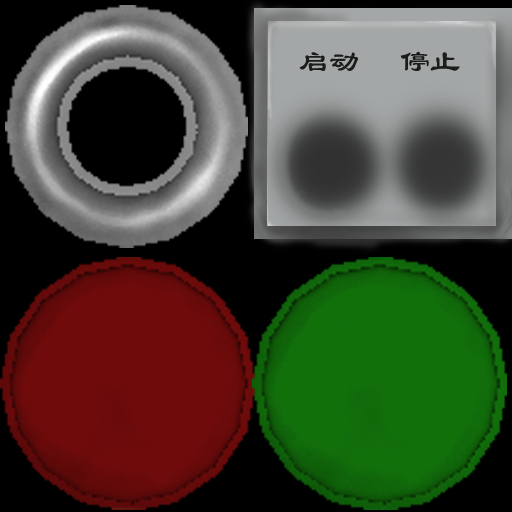
<style>
.page{position:relative;width:512px;height:512px;background:#000000}
.page>*{position:absolute;margin:0}
.t1{font:30px "LiSu";color:#1c1c1b}
</style>
<div class="page">
<p class="t1" style="left:299px;top:52px;width:59px;height:19px">启动</p>
<p class="t1" style="left:400px;top:51px;width:60px;height:20px">停止</p>
</div>
